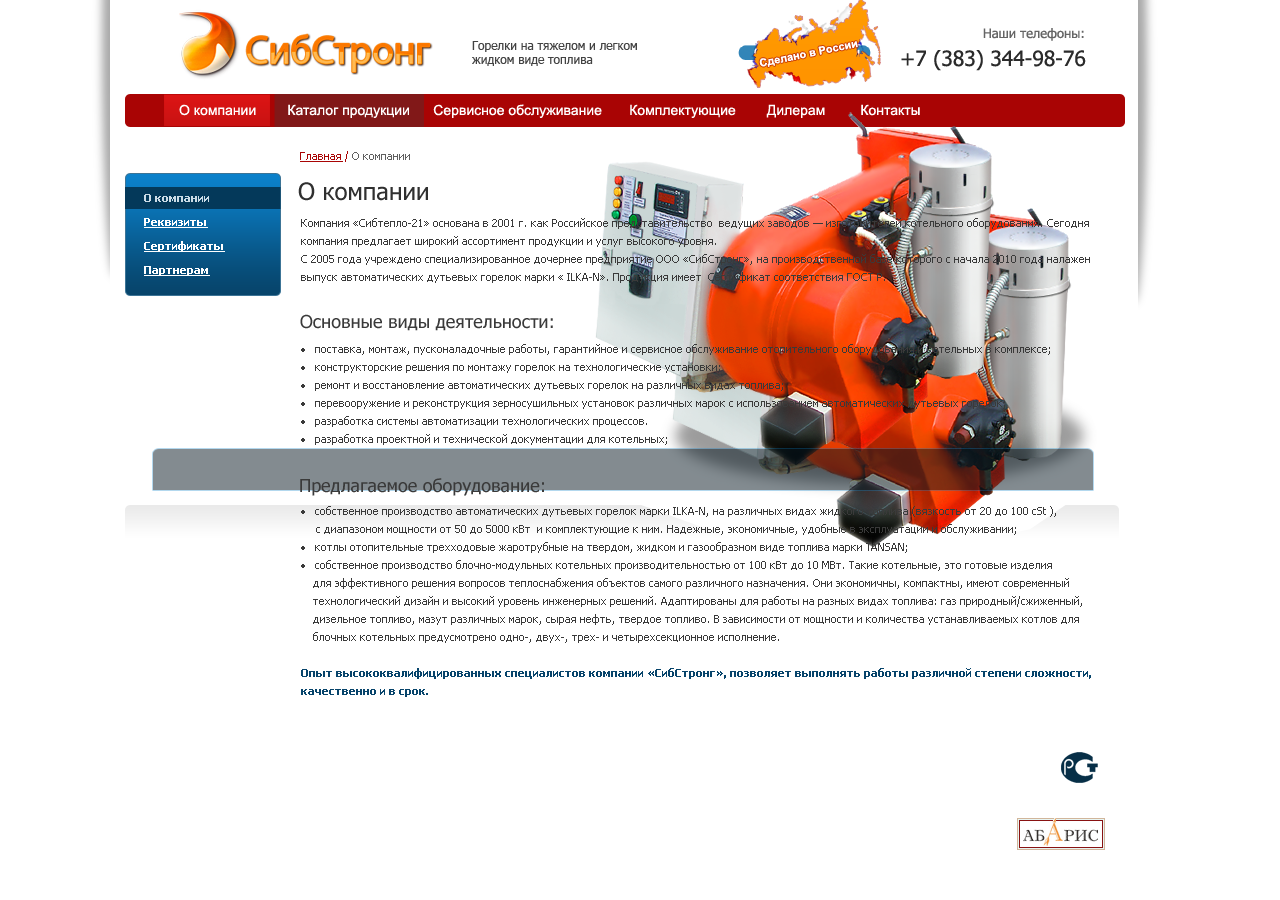
<style>
.page{position:relative;width:1280px;height:900px;background:#ffffff}
.page>*{position:absolute;margin:0}
.t1{font:13px "Tahoma";color:#656565}
.t2{font:12px "Tahoma";color:#434343}
.t3{font:11px "Arial-BoldMT";color:#ffffff}
.t4{font:21px "Tahoma";color:#2b2b2b}
.t5{font:14px "ArialMT";color:#ffffff}
.t6{font:14px "Tahoma";color:#ffffff}
.t7{font:11px "Tahoma";color:#606060}
.t8{font:11px "Tahoma";color:#a90404;text-decoration:underline}
.t9{font:11px "Tahoma";color:#a90404}
.t10{font:24px "Tahoma";color:#303030}
.t11{font:11px/12px "Tahoma-Bold";color:#ffffff;text-decoration:underline}
.t12{font:11px/12px "Tahoma-Bold";color:#cbdce7}
.t13{font:11px/18px "Tahoma";color:#3a3a3a}
.t14{font:11px/18px "Tahoma-Bold";color:#07446b}
.t15{font:18px "Tahoma";color:#3a3a3a}
</style>
<div class="page">
<p class="t1" style="left:983px;top:28px;width:101px;height:13px">Наши телефоны:</p>
<p class="t2" style="left:472px;top:41px;width:165px;height:25px">Горелки на тяжелом и легком <br>жидком виде топлива</p>
<p class="t3" style="left:759px;top:41px;width:99px;height:26px;rotate:-12deg">Сделано в России</p>
<p class="t4" style="left:901px;top:50px;width:185px;height:21px">+7 (383) 344-98-76</p>
<p class="t5" style="left:179px;top:104px;width:741px;height:14px">О компании        Каталог продукции      Сервисное обслуживание       Комплектующие        Дилерам         Контакт<span class="t6">ы</span></p>
<p class="t7" style="left:300px;top:151px;width:110px;height:11px"><span class="t8">Главная</span><span class="t9"> /</span> О компании</p>
<p class="t10" style="left:298px;top:182px;width:130px;height:19px">О компании</p>
<p class="t11" style="left:144px;top:194px;width:81px;height:82px"><span class="t12">О компании<br></span><br>Реквизиты<br><br>Сертификаты<br><br>Партнерам</p>
<p class="t13" style="left:301px;top:218px;width:790px;height:479px">Компания «Сибтепло-21» основана в 2001 г. как Российское представительство  ведущих заводов — изготовителей котельного оборудования. Сегодня <br>компания предлагает широкий ассортимент продукции и услуг высокого уровня. <br>С 2005 года учреждено специализированное дочернее предприятие ООО «СибСтронг», на производственной базе которого с начала 2010 года налажен <br>выпуск автоматических дутьевых горелок марки « ILKA-N». Продукция имеет  Сертификат соответствия ГОСТ Р.<br><br><br><br>•   поставка, монтаж, пусконаладочные работы, гарантийное и сервисное обслуживание отопительного оборудования и котельных в комплексе;<br>•   конструкторские решения по монтажу горелок на технологические установки;<br>•   ремонт и восстановление автоматических дутьевых горелок на различных видах топлива;<br>•   перевооружение и реконструкция зерносушильных установок различных марок с использованием автоматических дутьевых горелок;<br>•   разработка системы автоматизации технологических процессов.<br>•   разработка проектной и технической документации для котельных;<br><br><br><br>•   собственное производство автоматических дутьевых горелок марки ILKA-N, на различных видах жидкого топлива (вязкость от 20 до 100 сSt ), <br>     с диапазоном мощности от 50 до 5000 кВт  и комплектующие к ним. Надежные, экономичные, удобные в эксплуатации и обслуживании; <br>•   котлы отопительные трехходовые жаротрубные на твердом, жидком и газообразном виде топлива марки TANSAN;<br>•   собственное производство блочно-модульных котельных производительностью от 100 кВт до 10 МВт. Такие котельные, это готовые изделия <br>    для эффективного решения вопросов теплоснабжения объектов самого различного назначения. Они экономичны, компактны, имеют современный <br>    технологический дизайн и высокий уровень инженерных решений. Адаптированы для работы на разных видах топлива: газ природный/сжиженный, <br>    дизельное топливо, мазут различных марок, сырая нефть, твердое топливо. В зависимости от мощности и количества устанавливаемых котлов для <br>    блочных котельных предусмотрено одно-, двух-, трех- и четырехсекционное исполнение.<br><br><span class="t14">Опыт высококвалифицированных специалистов компании «СибСтронг», позволяет выполнять работы различной степени сложности, <br>качественно и в срок.</span></p>
<p class="t15" style="left:300px;top:314px;width:253px;height:17px">Основные виды деятельности:</p>
<p class="t15" style="left:300px;top:478px;width:244px;height:18px">Предлагаемое оборудование:</p>
</div>
